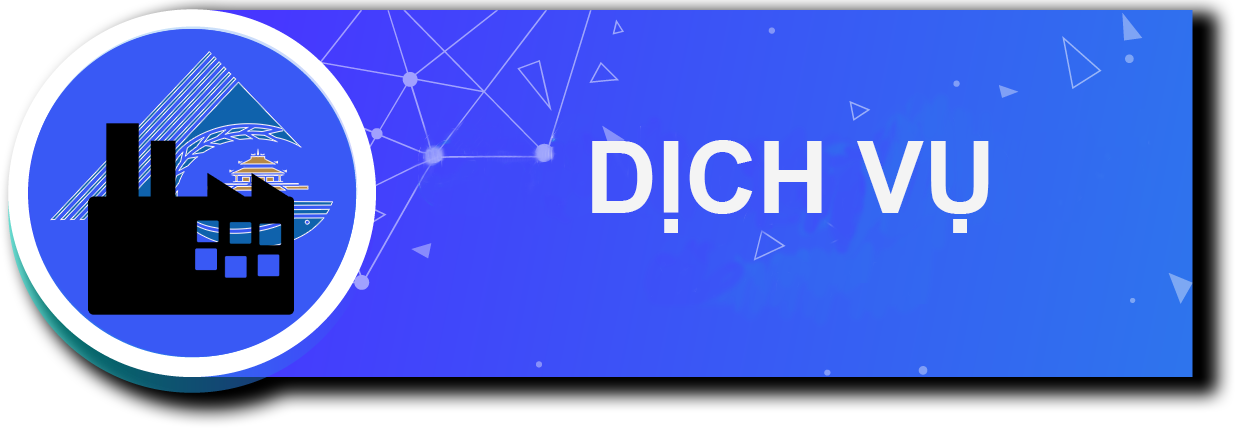
<style>
.page{position:relative;width:1242px;height:428px}
.page>*{position:absolute;margin:0}
.t1{font:100px "SVN-Arial2bold";color:#f4f4f4}
</style>
<div class="page">
<p class="t1" style="left:592px;top:140px;width:397px;height:93px">DỊCH VỤ</p>
</div>
